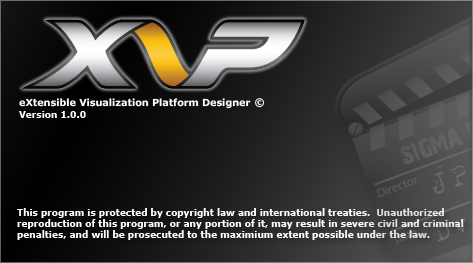
<style>
.page{position:relative;width:473px;height:263px}
.page>*{position:absolute;margin:0}
.t1{font:9.6px "Verdana-Bold";color:#fefefe}
.t2{font:10.5px "Verdana-Bold";color:#fefefe}
.t3{font:9px "Verdana-Bold";color:#fefefe}
</style>
<div class="page">
<p class="t1" style="left:19px;top:98px;width:232px;height:11px">eXtensible Visualization Platform Designer</p>
<p class="t2" style="left:255px;top:98px;width:10px;height:10px">©</p>
<p class="t3" style="left:19px;top:111px;width:67px;height:7px">Version 1.0.0</p>
<p class="t3" style="left:17px;top:208px;width:446px;height:32px">This program is protected by copyright law and international treaties.  Unauthorized<br>reproduction of this program, or any portion of it, may result in severe civil and criminal<br>penalties, and will be prosecuted to the maximium extent possible under the law.</p>
</div>
